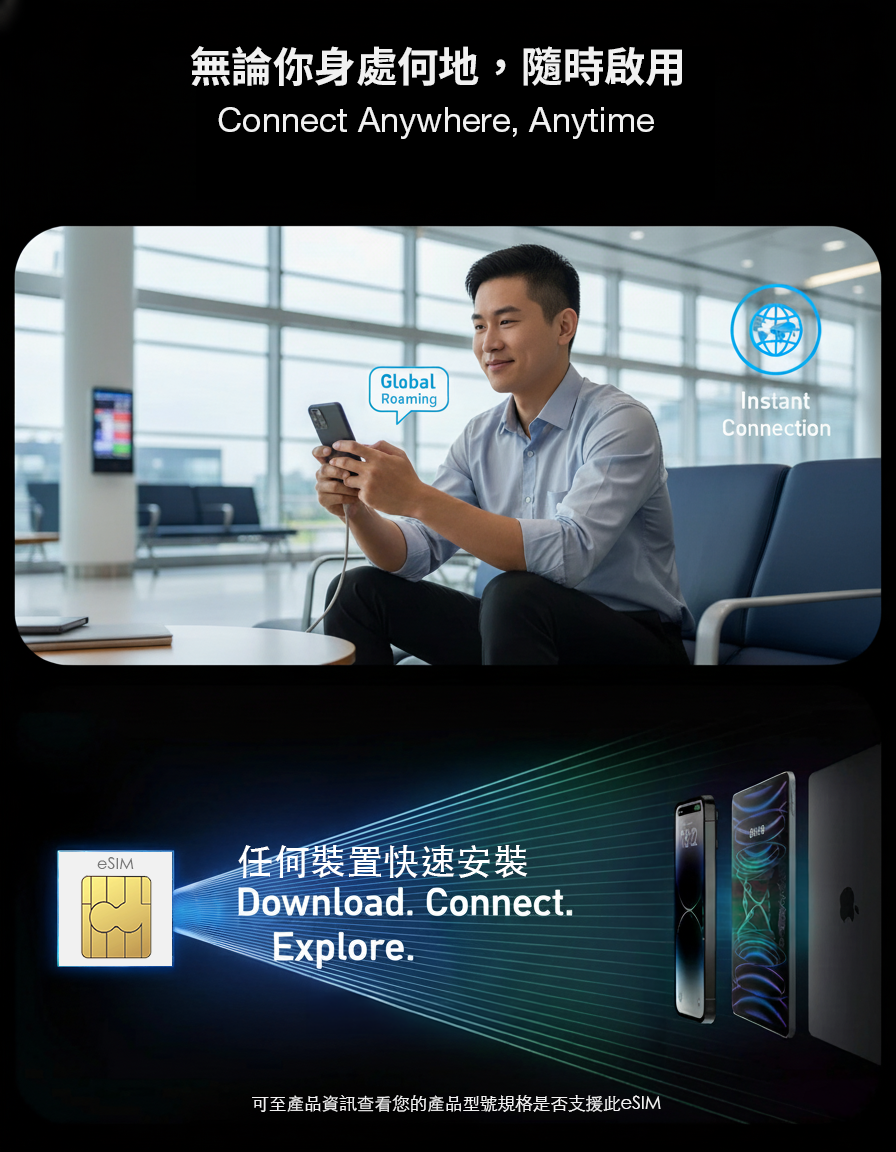
<style>
.page{position:relative;width:896px;height:1152px}
.page>*{position:absolute;margin:0}
.t1{font:41.4px "SourceHanSansTC-Bold";color:#f1f1f1}
.t2{font:34.5px "HelveticaNeueLTPro-Roman";color:#f1f1f1}
.t3{font:36.5px "STHeitiTC-Medium";color:#ffffff}
.t4{font:16.1px "STHeitiTC-Light";color:#787878}
.t5{font:17.6px "STHeitiTC-Light";color:#f1f1f1}
</style>
<div class="page">
<p class="t1" style="left:190px;top:46px;width:492px;height:40px">無論你身處何地，隨時啟用</p>
<p class="t2" style="left:218px;top:107px;width:436px;height:32px">Connect Anywhere, Anytime</p>
<p class="t3" style="left:238px;top:845px;width:290px;height:33px">任何裝置快速安裝</p>
<p class="t4" style="left:97px;top:857px;width:37px;height:12px">eSIM</p>
<p class="t5" style="left:252px;top:1095px;width:409px;height:17px">可至產品資訊查看您的產品型號規格是否支援此eSIM</p>
</div>
